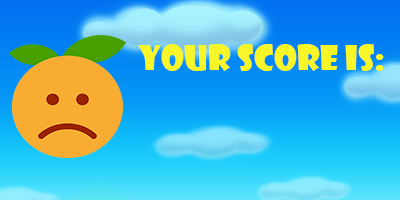
<style>
.page{position:relative;width:400px;height:200px}
.page>*{position:absolute;margin:0}
.t1{font:33.3px "ShowcardGothic-Reg";color:#f8f628}
</style>
<div class="page">
<p class="t1" style="left:138px;top:44px;width:246px;height:27px">Your score is:</p>
</div>
